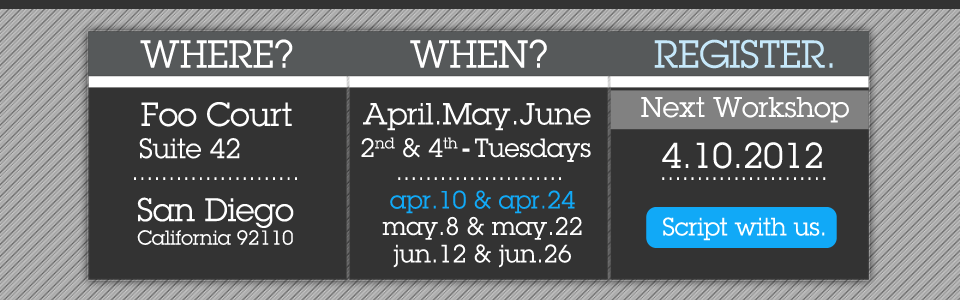
<style>
.page{position:relative;width:960px;height:300px;background:#333333}
.page>*{position:absolute;margin:0}
.t1{font:38px "LubalinGraphStd-Book";color:#ffffff}
.t2{font:38px "LubalinGraphStd-Book";color:#c5e7f9}
.t3{font:32.5px "LubalinGraphStd-Book";color:#ffffff}
.t4{font:27.9px "LubalinGraphStd-Book";color:#ffffff}
.t5{font:29.8px "LubalinGraphStd-Book";color:#ffffff}
.t6{font:25.6px "LubalinGraphStd-Book";color:#ffffff}
.t7{font:25.8px "LubalinGraphStd-Demi";color:#ffffff}
.t8{font:27.1px "LubalinGraphStd-Book";color:#ffffff}
.t9{font:34.9px "LubalinGraphStd-Book";color:#ffffff}
.t10{font:24.4px "LubalinGraphStd-Book";color:#ffffff}
.t11{font:19.6px "LubalinGraphStd-Book";color:#ffffff}
.t12{font:31.8px "LubalinGraphStd-Book";color:#ffffff}
.t13{font:24.4px "LubalinGraphStd-Book";color:#11a9f7}
</style>
<div class="page">
<p class="t1" style="left:140px;top:39px;width:153px;height:29px">WHERE?</p>
<p class="t1" style="left:410px;top:39px;width:137px;height:29px">WHEN?</p>
<p class="t2" style="left:654px;top:39px;width:179px;height:30px">REGISTER.</p>
<p class="t3" style="left:141px;top:102px;width:151px;height:25px">Foo Court</p>
<p class="t4" style="left:641px;top:97px;width:208px;height:26px">Next Workshop</p>
<p class="t5" style="left:363px;top:103px;width:228px;height:28px">April.May.June</p>
<p class="t6" style="left:361px;top:137px;width:230px;height:25px">2nd &amp; 4th <span class="t7">- </span>Tuesdays</p>
<p class="t8" style="left:139px;top:138px;width:101px;height:21px">Suite 42</p>
<p class="t9" style="left:662px;top:142px;width:160px;height:27px">4.10.2012</p>
<p class="t10" style="left:134px;top:177px;width:163px;height:3px">.......................</p>
<p class="t10" style="left:398px;top:177px;width:163px;height:3px">.......................</p>
<p class="t10" style="left:662px;top:177px;width:164px;height:3px">.......................</p>
<p class="t11" style="left:137px;top:197px;width:157px;height:48px;text-align:center"><span class="t12">San Diego</span><br>California 92110</p>
<p class="t13" style="left:390px;top:190px;width:185px;height:24px">apr.10 &amp; apr.24</p>
<p class="t10" style="left:382px;top:216px;width:200px;height:24px">may.8 &amp; may.22</p>
<p class="t10" style="left:663px;top:217px;width:162px;height:24px">Script with us.</p>
<p class="t10" style="left:393px;top:244px;width:178px;height:24px">jun.12 &amp; jun.26</p>
</div>
